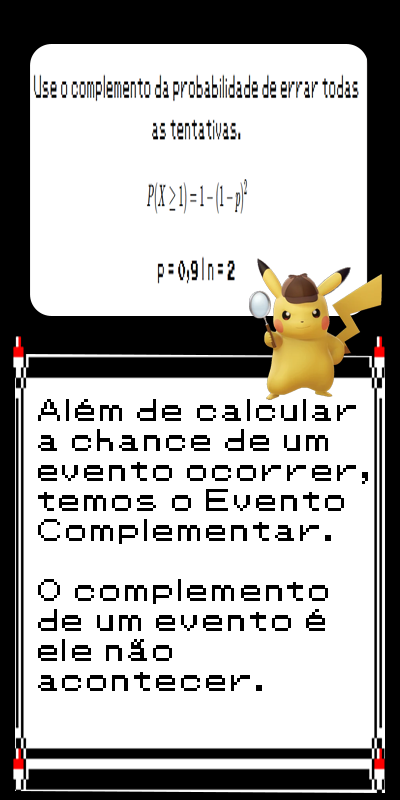
<style>
.page{position:relative;width:400px;height:800px;background:#ffffff}
.page>*{position:absolute;margin:0}
.t1{font:25px "Pokemon-Classic";color:#000000}
</style>
<div class="page">
<p class="t1" style="left:38px;top:399px;width:330px;height:292px">Além de calcular<br>a chance de um<br>evento ocorrer,<br>temos o Evento <br>Complementar.<br><br>O complemento <br>de um evento é <br>ele não <br>acontecer.</p>
</div>
